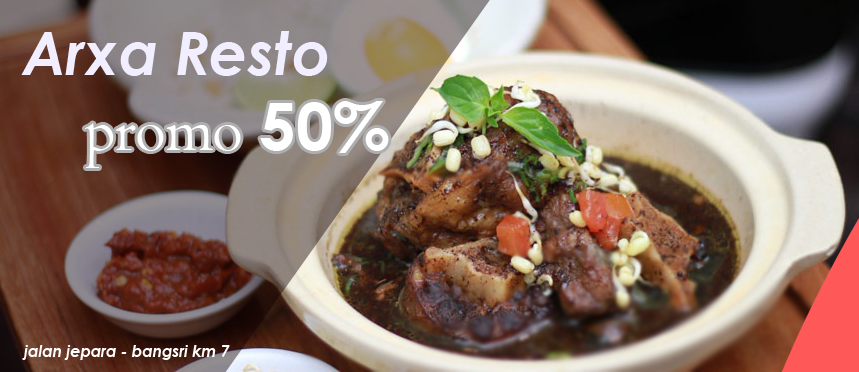
<style>
.page{position:relative;width:859px;height:372px}
.page>*{position:absolute;margin:0}
.t1{font:59.7px "CenturyGothic-BoldItalic";color:#f1eeff}
.t2{font:65.7px "Centaur";color:#ffffff}
.t3{font:65.7px "CenturyGothic-Bold";color:#ffffff}
.t4{font:15.7px "CenturyGothic-BoldItalic";color:#ffffff}
</style>
<div class="page">
<p class="t1" style="left:21px;top:31px;width:307px;height:45px">Arxa Resto</p>
<p class="t2" style="left:84px;top:101px;width:305px;height:67px">promo <span class="t3">50%</span></p>
<p class="t4" style="left:22px;top:345px;width:208px;height:15px">jalan jepara - bangsri km 7</p>
</div>
